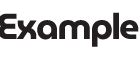
<style>
.page{position:relative;width:139px;height:59px;background:#ffffff}
.page>*{position:absolute;margin:0}
.t1{font:36px "MuseoModerno-Bold";letter-spacing:-0.05em;color:#231f20}
</style>
<div class="page">
<p class="t1" style="left:0px;top:12px;width:139px;height:35px">Example</p>
</div>
